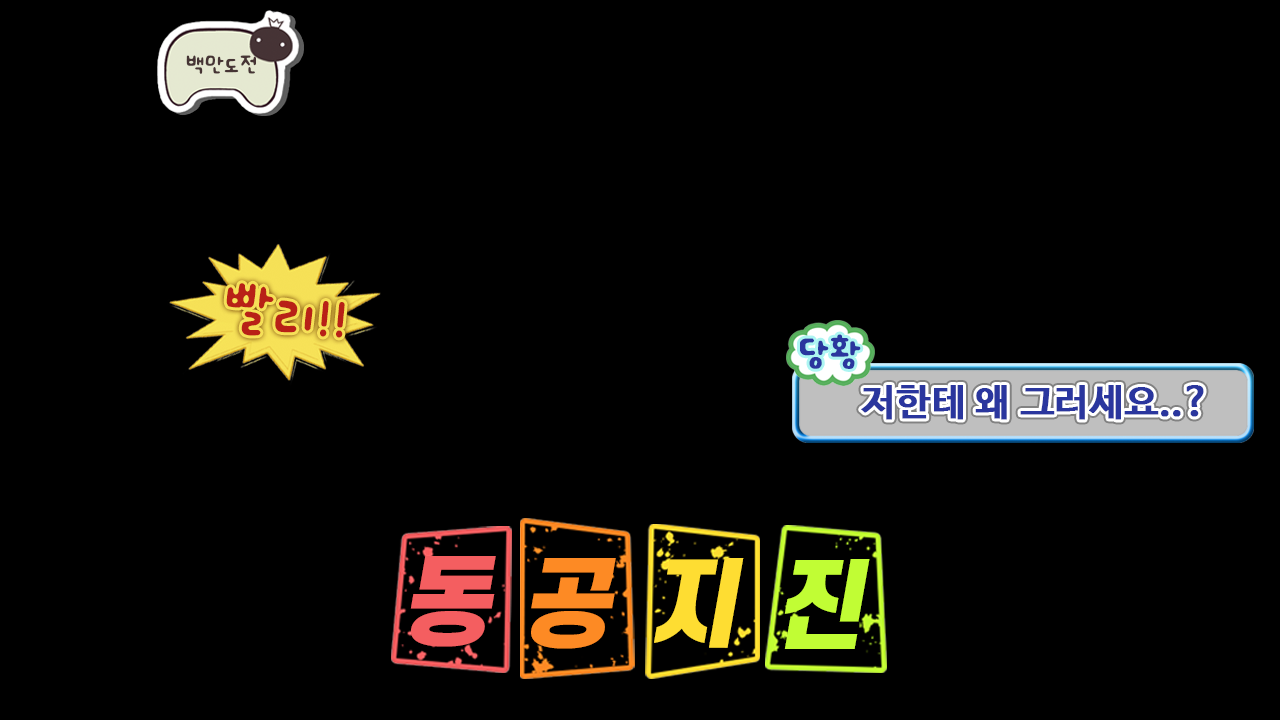
<style>
.page{position:relative;width:1280px;height:720px;background:#000000}
.page>*{position:absolute;margin:0}
.t1{font:23.9px "777Chocolatlatte-";color:#463434}
.t2{font:60.9px "777Chocolatlatte-";color:#b82117}
.t3{font:38.3px "777Chocolatlatte-";color:#2a369e;font-weight:bold}
.t4{font:37.9px "NanumBarunGothicBold";color:#2a369e;font-weight:bold}
.t5{font:94.3px "S-CoreDream-9Black";color:#f45e60;font-style:italic}
.t6{font:94.3px "S-CoreDream-9Black";color:#fd8a24;font-style:italic}
.t7{font:94.3px "S-CoreDream-9Black";color:#fedd32;font-style:italic}
.t8{font:94.3px "S-CoreDream-9Black";color:#c1fd34;font-style:italic}
</style>
<div class="page">
<p class="t1" style="left:186px;top:55px;width:70px;height:19px">백만도전</p>
<p class="t2" style="left:226px;top:283px;width:119px;height:55px;rotate:6deg">빨리!!</p>
<p class="t3" style="left:800px;top:334px;width:61px;height:35px">당황</p>
<p class="t4" style="left:861px;top:385px;width:343px;height:35px">저한테 왜 그러세요..?</p>
<p class="t5" style="left:410px;top:556px;width:86px;height:91px">동</p>
<p class="t6" style="left:531px;top:558px;width:85px;height:91px">공</p>
<p class="t7" style="left:654px;top:558px;width:90px;height:90px">지</p>
<p class="t8" style="left:784px;top:559px;width:86px;height:90px">진</p>
</div>
